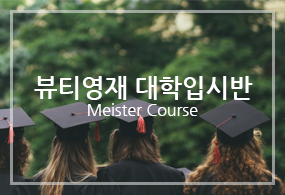
<style>
.page{position:relative;width:285px;height:195px}
.page>*{position:absolute;margin:0}
.t1{font:25px "NanumGothicBold";color:#ffffff}
.t2{font:16px "NanumGothic";color:#ffffff}
</style>
<div class="page">
<p class="t1" style="left:34px;top:76px;width:219px;height:24px">뷰티영재 대학입시반</p>
<p class="t2" style="left:88px;top:103px;width:110px;height:13px">Meister Course</p>
</div>
